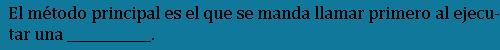
<style>
.page{position:relative;width:500px;height:50px;background:#0f789b}
.page>*{position:absolute;margin:0}
.t1{font:18px "CambriaMath";color:#020202}
</style>
<div class="page">
<p class="t1" style="left:9px;top:6px;width:490px;height:36px">El método principal es el que se manda llamar primero al ejecutar una ____________.</p>
</div>
